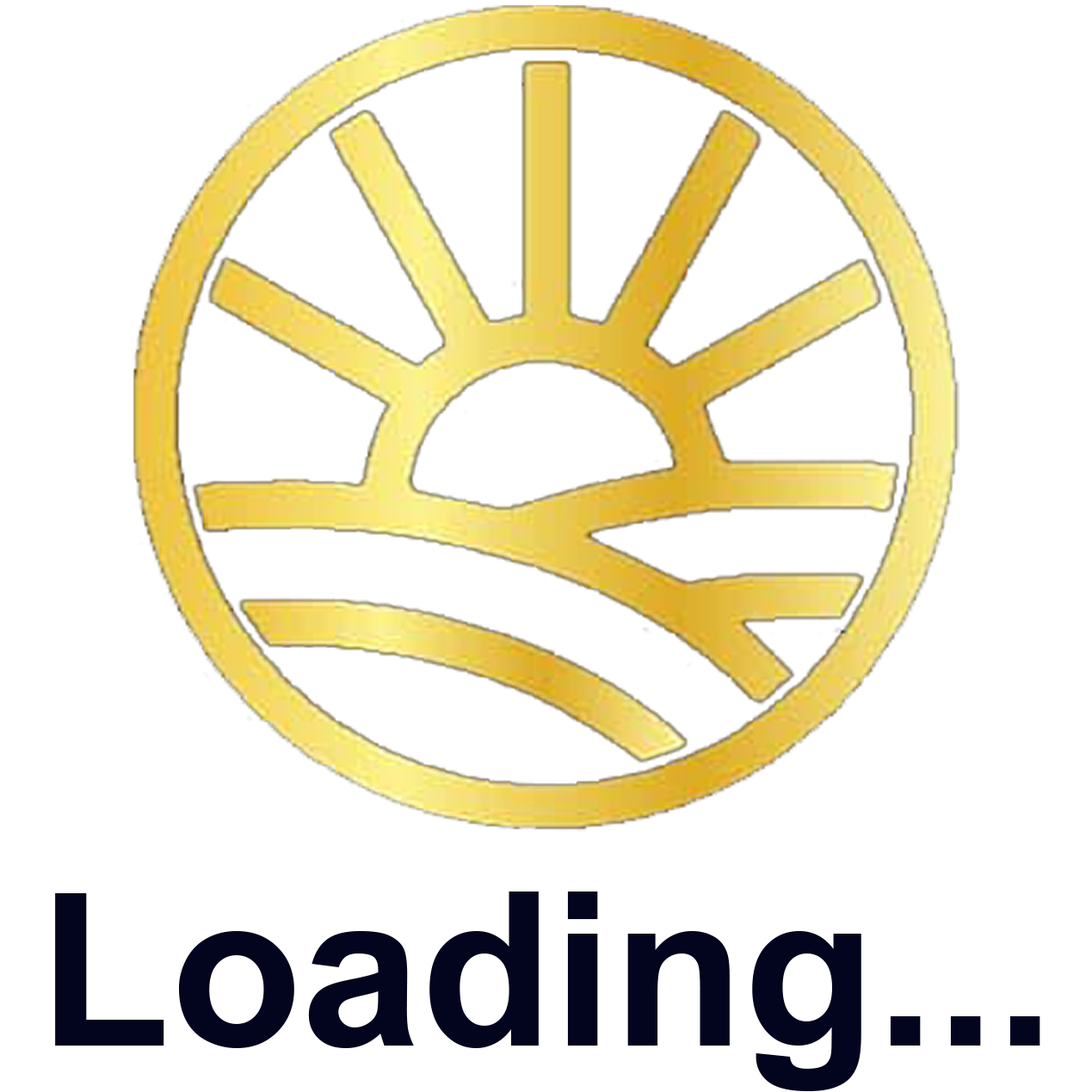
<style>
.page{position:relative;width:1092px;height:1092px;background:#ffffff}
.page>*{position:absolute;margin:0}
.t1{font:215.1px "Arial-BoldMT";color:#03051e}
</style>
<div class="page">
<p class="t1" style="left:55px;top:891px;width:985px;height:200px">Loading...</p>
</div>
